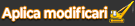
<style>
.page{position:relative;width:135px;height:26px;background:#333333}
.page>*{position:absolute;margin:0}
.t1{font:14.3px "Montserrat-Bold";letter-spacing:-0.04em;color:#ffffff;scale:0.88 1}
</style>
<div class="page">
<p class="t1" style="left:2px;top:6px;width:105px;height:15px">Aplica modificari</p>
</div>
